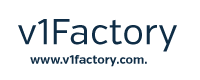
<style>
.page{position:relative;width:200px;height:80px;background:#ffffff}
.page>*{position:absolute;margin:0}
.t1{font:36px "VerbRegular";color:#0f2d46}
.t2{font:12px "VerbRegular-Bold";color:#0f2d46}
</style>
<div class="page">
<p class="t1" style="left:18px;top:19px;width:159px;height:33px">v1Factory</p>
<p class="t2" style="left:30px;top:55px;width:117px;height:12px">www.v1factory.com.</p>
</div>
